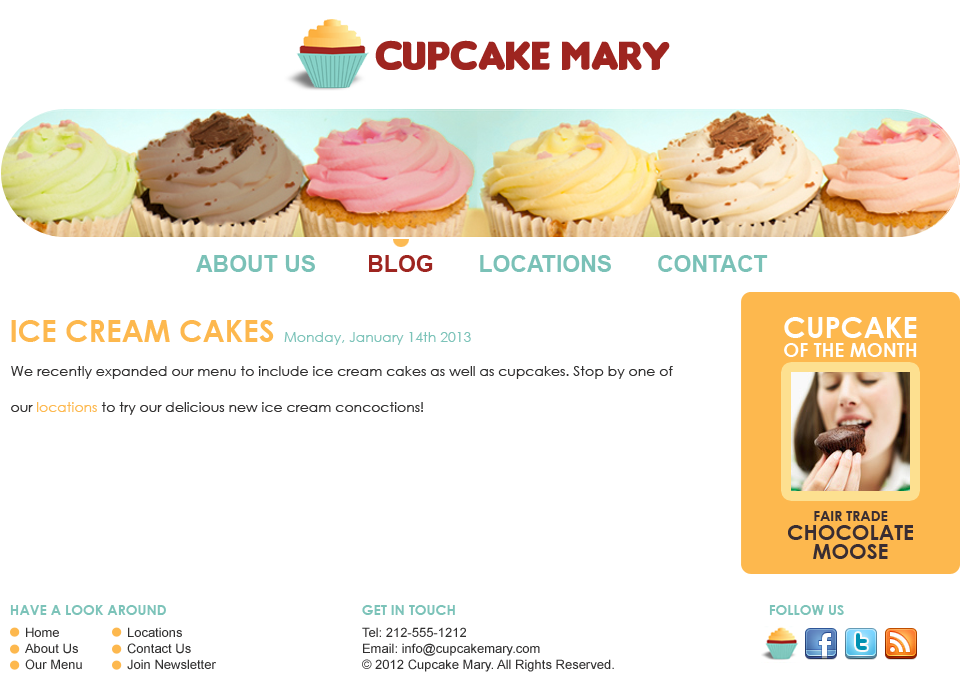
<style>
.page{position:relative;width:960px;height:690px;background:#ffffff}
.page>*{position:absolute;margin:0}
.t1{font:23px "Arial-BoldMT";color:#7ac1b7}
.t2{font:23px "Arial-BoldMT";color:#9e2520}
.t3{font:19px/19px "CenturyGothic-Bold";color:#ffffff;text-transform:uppercase}
.t4{font:29px "CenturyGothic-Bold";color:#ffffff;text-transform:uppercase}
.t5{font:30px "CenturyGothic-Bold";color:#fdb84e;text-transform:uppercase}
.t6{font:14px "CenturyGothic";color:#7cc3b9}
.t7{font:14px "CenturyGothic";color:#313030}
.t8{font:14px "CenturyGothic";color:#fdb84e}
.t9{font:30px "CenturyGothic-Bold";color:#ffffff}
.t10{font:21px/19px "CenturyGothic-Bold";color:#392d32;text-transform:uppercase}
.t11{font:14px/19px "CenturyGothic-Bold";color:#392d32;text-transform:uppercase}
.t12{font:14px "CenturyGothic-Bold";color:#7cc3b9;text-transform:uppercase}
.t13{font:13px "ArialMT";color:#313030}
</style>
<div class="page">
<p class="t1" style="left:196px;top:255px;width:572px;height:17px">ABOUT US        <span class="t2">BLOG</span>       LOCATIONS       CONTACT</p>
<p class="t3" style="left:784px;top:317px;width:133px;height:40px;text-align:center"><span class="t4">Cupcake<br></span>of the Month</p>
<p class="t5" style="left:11px;top:320px;width:263px;height:22px">ice cream cakes</p>
<p class="t6" style="left:284px;top:332px;width:187px;height:13px">Monday, January 14th 2013</p>
<p class="t7" style="left:11px;top:366px;width:662px;height:49px">We recently expanded our menu to include ice cream cakes as well as cupcakes. Stop by one of our <span class="t8">locations</span> to try our delicious new ice cream concoctions!   <span class="t9">MENU</span></p>
<p class="t10" style="left:788px;top:511px;width:125px;height:48px;text-align:center"><span class="t11">Fair Trade<br></span>Chocolate<br>MoosE</p>
<p class="t12" style="left:10px;top:605px;width:156px;height:10px">Have a Look Around</p>
<p class="t12" style="left:362px;top:605px;width:93px;height:10px">Get in Touch</p>
<p class="t12" style="left:769px;top:605px;width:75px;height:10px">Follow Us</p>
<p class="t13" style="left:25px;top:627px;width:57px;height:43px">Home<br>About Us<br>Our Menu</p>
<p class="t13" style="left:127px;top:627px;width:89px;height:43px">Locations<br>Contact Us <br>Join Newsletter</p>
<p class="t13" style="left:362px;top:627px;width:252px;height:45px">Tel: 212-555-1212<br>Email: info@cupcakemary.com<br>© 2012 Cupcake Mary. All Rights Reserved.</p>
</div>
